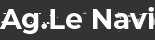
<style>
.page{position:relative;width:155px;height:40px;background:#333333}
.page>*{position:absolute;margin:0}
.t1{font:28px "Montserrat-Bold";color:#ffffff}
</style>
<div class="page">
<p class="t1" style="left:0px;top:7px;width:154px;height:27px">Ag.Le Navi</p>
</div>
